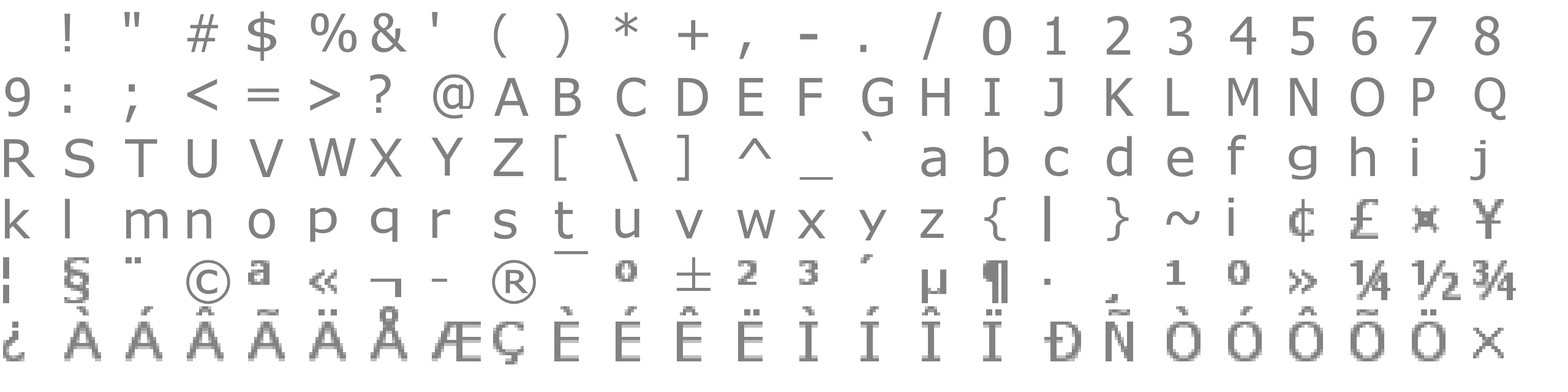
<style>
.page{position:relative;width:1568px;height:392px;background:#ffffff}
.page>*{position:absolute;margin:0}
.t1{font:52.1px "Tahoma";letter-spacing:-0.065em;color:#808080}
.t2{font:52.1px "Tahoma";letter-spacing:-0.065em;color:#808080;scale:1.22 1}
.t3{font:45.9px "Tahoma";letter-spacing:-0.065em;color:#808080;scale:0.94 1}
.t4{font:52.1px "Tahoma";letter-spacing:-0.065em;color:#808080;scale:1.17 1}
.t5{font:62.8px "Tahoma";letter-spacing:-0.065em;color:#808080}
.t6{font:52.1px "Verdana";letter-spacing:-0.065em;color:#808080}
.t7{font:52.1px "Tahoma";letter-spacing:-0.065em;color:#808080;scale:0.91 1}
.t8{font:52.1px "Tahoma";letter-spacing:-0.065em;color:#808080;scale:0.89 1}
.t9{font:45.9px "Tahoma";letter-spacing:-0.065em;color:#808080;scale:1.04 1}
.t10{font:56.8px "Tahoma";letter-spacing:-0.065em;color:#808080}
.t11{font:44.9px "Tahoma";letter-spacing:-0.065em;color:#808080;scale:1.28 1}
.t12{font:48.4px "Verdana";letter-spacing:-0.065em;color:#808080;scale:0.96 1}
.t13{font:44.6px "Verdana";letter-spacing:-0.065em;color:#808080;scale:1.28 1}
.t14{font:42.9px "Verdana";letter-spacing:-0.065em;color:#808080;scale:1.21 1}
.t15{font:46.3px "Verdana";letter-spacing:-0.065em;color:#808080;scale:1.12 1}
.t16{font:46.3px "Verdana";letter-spacing:-0.065em;color:#808080}
.t17{font:47.9px "Verdana";letter-spacing:-0.065em;color:#808080;scale:1.4 1}
.t18{font:44.8px "Verdana";letter-spacing:-0.065em;color:#808080;scale:1.23 1}
.t19{font:40.9px "Verdana";letter-spacing:-0.065em;color:#808080;scale:1.27 1}
</style>
<div class="page">
<p class="t1" style="left:64px;top:13px;width:6px;height:39px">!</p>
<p class="t1" style="left:124px;top:12px;width:16px;height:15px">"</p>
<p class="t1" style="left:187px;top:14px;width:31px;height:38px">#</p>
<p class="t2" style="left:248px;top:11px;width:29px;height:50px">$</p>
<p class="t1" style="left:311px;top:13px;width:46px;height:40px">%</p>
<p class="t1" style="left:372px;top:13px;width:35px;height:40px">&amp;</p>
<p class="t1" style="left:432px;top:12px;width:6px;height:15px">'</p>
<p class="t3" style="left:494px;top:13px;width:13px;height:45px">(</p>
<p class="t3" style="left:556px;top:13px;width:13px;height:45px">)</p>
<p class="t1" style="left:615px;top:12px;width:23px;height:24px">*</p>
<p class="t1" style="left:922px;top:12px;width:20px;height:48px">/</p>
<p class="t4" style="left:983px;top:16px;width:29px;height:40px">0</p>
<p class="t1" style="left:1047px;top:16px;width:19px;height:39px">1</p>
<p class="t1" style="left:1107px;top:16px;width:24px;height:39px">2</p>
<p class="t1" style="left:1169px;top:16px;width:23px;height:40px">3</p>
<p class="t1" style="left:1230px;top:16px;width:27px;height:39px">4</p>
<p class="t1" style="left:1291px;top:16px;width:23px;height:40px">5</p>
<p class="t1" style="left:1352px;top:16px;width:25px;height:40px">6</p>
<p class="t1" style="left:1412px;top:16px;width:24px;height:39px">7</p>
<p class="t1" style="left:1475px;top:16px;width:25px;height:40px">8</p>
<p class="t1" style="left:678px;top:20px;width:30px;height:30px">+</p>
<p class="t1" style="left:739px;top:42px;width:11px;height:17px">,</p>
<p class="t5" style="left:800px;top:34px;width:18px;height:6px">-</p>
<p class="t1" style="left:860px;top:44px;width:7px;height:8px">.</p>
<p class="t1" style="left:5px;top:77px;width:25px;height:40px">9</p>
<p class="t1" style="left:370px;top:74px;width:21px;height:39px">?</p>
<p class="t1" style="left:433px;top:74px;width:41px;height:45px">@</p>
<p class="t6" style="left:494px;top:78px;width:35px;height:38px">A</p>
<p class="t1" style="left:555px;top:78px;width:26px;height:38px">B</p>
<p class="t1" style="left:617px;top:77px;width:29px;height:40px">C</p>
<p class="t1" style="left:678px;top:78px;width:30px;height:38px">D</p>
<p class="t1" style="left:739px;top:78px;width:24px;height:38px">E</p>
<p class="t1" style="left:799px;top:78px;width:23px;height:38px">F</p>
<p class="t1" style="left:862px;top:77px;width:31px;height:40px">G</p>
<p class="t1" style="left:922px;top:78px;width:28px;height:38px">H</p>
<p class="t1" style="left:985px;top:78px;width:15px;height:38px">I</p>
<p class="t1" style="left:1044px;top:78px;width:19px;height:39px">J</p>
<p class="t1" style="left:1106px;top:78px;width:28px;height:38px">K</p>
<p class="t1" style="left:1167px;top:78px;width:22px;height:38px">L</p>
<p class="t7" style="left:1228px;top:78px;width:30px;height:38px">M</p>
<p class="t1" style="left:1290px;top:78px;width:27px;height:38px">N</p>
<p class="t1" style="left:1351px;top:77px;width:33px;height:40px">O</p>
<p class="t8" style="left:1413px;top:78px;width:22px;height:38px">P</p>
<p class="t9" style="left:1475px;top:77px;width:31px;height:43px">Q</p>
<p class="t1" style="left:64px;top:84px;width:7px;height:29px">:</p>
<p class="t1" style="left:126px;top:84px;width:11px;height:38px">;</p>
<p class="t10" style="left:187px;top:79px;width:30px;height:32px">&lt;</p>
<p class="t11" style="left:248px;top:88px;width:31px;height:14px">=</p>
<p class="t10" style="left:310px;top:79px;width:30px;height:32px">&gt;</p>
<p class="t6" style="left:309px;top:138px;width:47px;height:38px">W</p>
<p class="t6" style="left:431px;top:137px;width:32px;height:39px">Y</p>
<p class="t6" style="left:494px;top:138px;width:30px;height:38px">Z</p>
<p class="t12" style="left:554px;top:134px;width:13px;height:47px">[</p>
<p class="t6" style="left:615px;top:134px;width:23px;height:48px">\</p>
<p class="t12" style="left:677px;top:134px;width:12px;height:47px">]</p>
<p class="t6" style="left:738px;top:138px;width:34px;height:21px">^</p>
<p class="t6" style="left:861px;top:131px;width:11px;height:10px">`</p>
<p class="t6" style="left:984px;top:136px;width:25px;height:41px">b</p>
<p class="t6" style="left:1107px;top:136px;width:25px;height:41px">d</p>
<p class="t6" style="left:1228px;top:135px;width:18px;height:40px">f</p>
<p class="t6" style="left:1351px;top:136px;width:24px;height:40px">h</p>
<p class="t6" style="left:1412px;top:138px;width:6px;height:38px">i</p>
<p class="t6" style="left:4px;top:139px;width:32px;height:38px">R</p>
<p class="t6" style="left:65px;top:138px;width:29px;height:40px">S</p>
<p class="t6" style="left:125px;top:139px;width:32px;height:38px">T</p>
<p class="t6" style="left:187px;top:139px;width:30px;height:39px">U</p>
<p class="t6" style="left:249px;top:139px;width:35px;height:38px">V</p>
<p class="t6" style="left:370px;top:138px;width:32px;height:39px">X</p>
<p class="t6" style="left:921px;top:147px;width:25px;height:30px">a</p>
<p class="t6" style="left:1045px;top:146px;width:23px;height:31px">c</p>
<p class="t6" style="left:1167px;top:146px;width:26px;height:31px">e</p>
<p class="t13" style="left:1288px;top:145px;width:28px;height:35px">g</p>
<p class="t14" style="left:1470px;top:140px;width:16px;height:41px">j</p>
<p class="t15" style="left:799px;top:177px;width:34px;height:3px">_</p>
<p class="t16" style="left:984px;top:197px;width:22px;height:44px">{</p>
<p class="t17" style="left:1044px;top:195px;width:6px;height:46px">|</p>
<p class="t16" style="left:1107px;top:197px;width:22px;height:44px">}</p>
<p class="t6" style="left:1228px;top:198px;width:6px;height:38px">i</p>
<p class="t6" style="left:5px;top:199px;width:26px;height:39px">k</p>
<p class="t6" style="left:65px;top:199px;width:5px;height:39px">l</p>
<p class="t6" style="left:126px;top:209px;width:42px;height:29px">m</p>
<p class="t6" style="left:187px;top:209px;width:24px;height:29px">n</p>
<p class="t6" style="left:249px;top:208px;width:26px;height:31px">o</p>
<p class="t18" style="left:310px;top:207px;width:27px;height:35px">p</p>
<p class="t18" style="left:371px;top:207px;width:27px;height:35px">q</p>
<p class="t6" style="left:432px;top:209px;width:18px;height:29px">r</p>
<p class="t6" style="left:494px;top:209px;width:23px;height:30px">s</p>
<p class="t6" style="left:555px;top:202px;width:18px;height:37px">t</p>
<p class="t6" style="left:615px;top:209px;width:25px;height:29px">u</p>
<p class="t6" style="left:675px;top:210px;width:28px;height:28px">v</p>
<p class="t6" style="left:737px;top:210px;width:39px;height:28px">w</p>
<p class="t6" style="left:797px;top:210px;width:29px;height:28px">x</p>
<p class="t19" style="left:859px;top:210px;width:28px;height:31px">y</p>
<p class="t6" style="left:920px;top:209px;width:24px;height:29px">z</p>
<p class="t6" style="left:1166px;top:211px;width:34px;height:14px">~</p>
<p class="t6" style="left:186px;top:260px;width:45px;height:44px">©</p>
<p class="t6" style="left:492px;top:260px;width:44px;height:44px">®</p>
</div>
